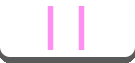
<style>
.page{position:relative;width:135px;height:63px;background:#ffffff}
.page>*{position:absolute;margin:0}
.t1{font:53.3px "ForteMT";color:#ff8ff1}
</style>
<div class="page">
<p class="t1" style="left:47px;top:6px;width:38px;height:44px">||</p>
</div>
